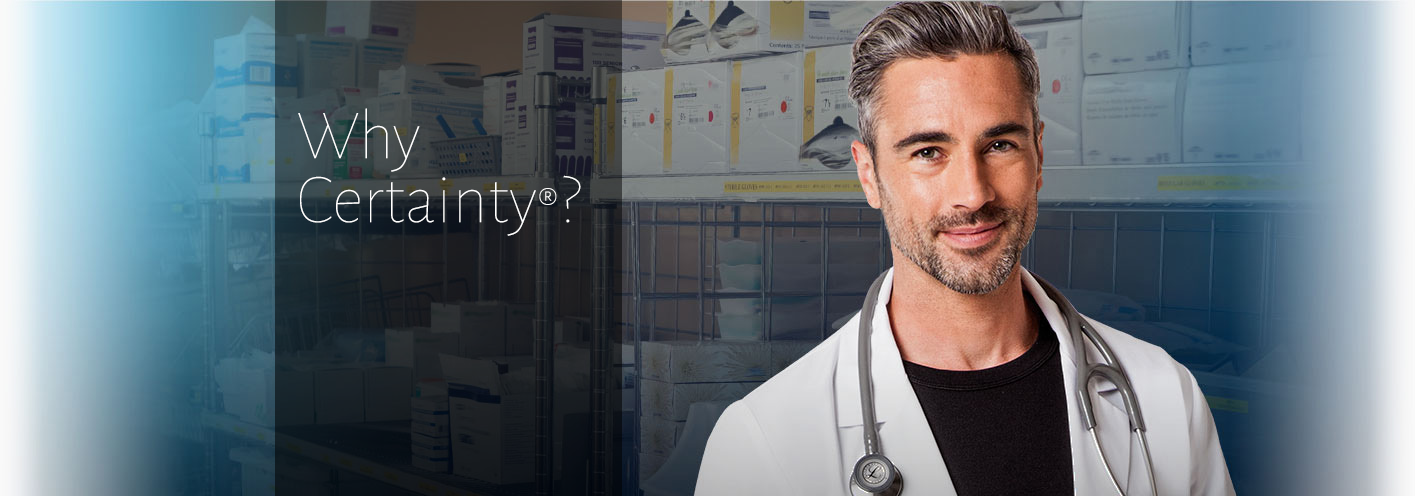
<style>
.page{position:relative;width:1415px;height:496px}
.page>*{position:absolute;margin:0}
.t1{font:71.1px/64px "AlegreyaSans-Thin";color:#ffffff}
.t2{font:48px/64px "AlegreyaSans-Thin";color:#ffffff}
</style>
<div class="page">
<p class="t1" style="left:298px;top:108px;width:283px;height:128px">Why<br>Certainty<span class="t2">®</span>?</p>
</div>
